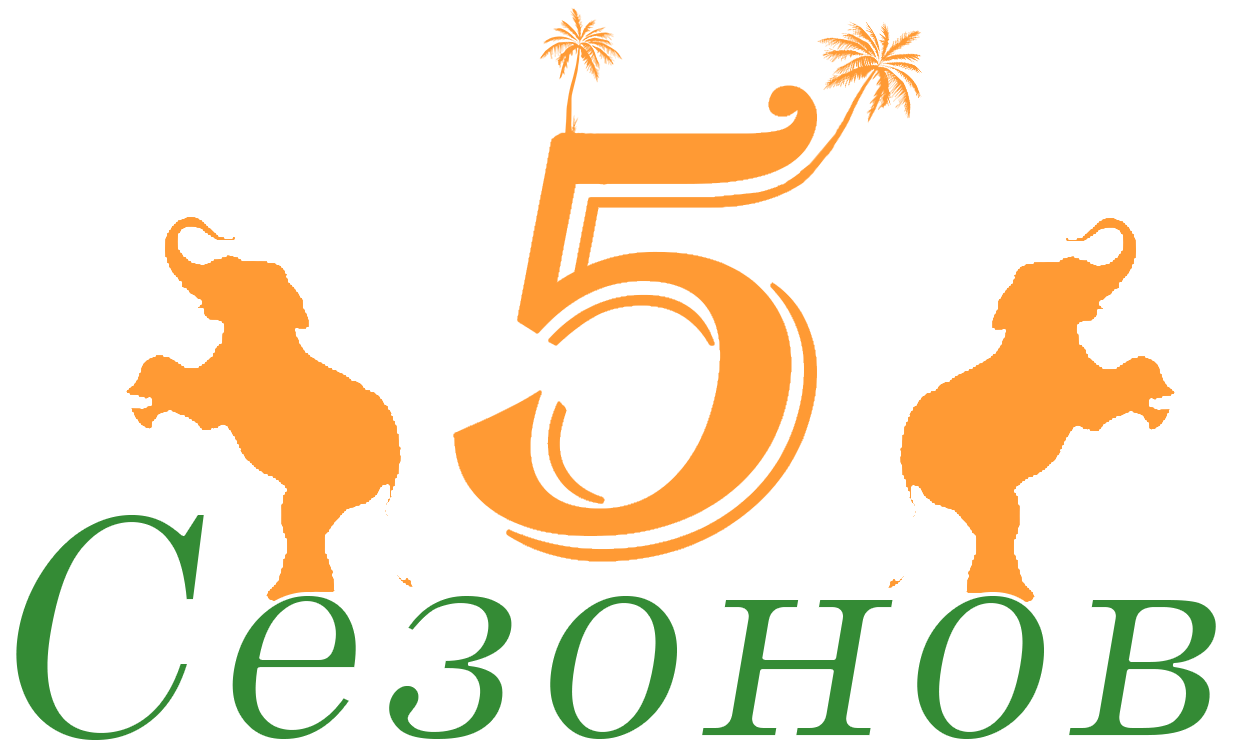
<style>
.page{position:relative;width:1251px;height:745px;background:#ffffff}
.page>*{position:absolute;margin:0}
.t1{font:304px "Century";letter-spacing:0.06em;color:#348b35;font-style:italic;scale:0.97 1}
</style>
<div class="page">
<p class="t1" style="left:14px;top:513px;width:1204px;height:229px">Сезонов</p>
</div>
